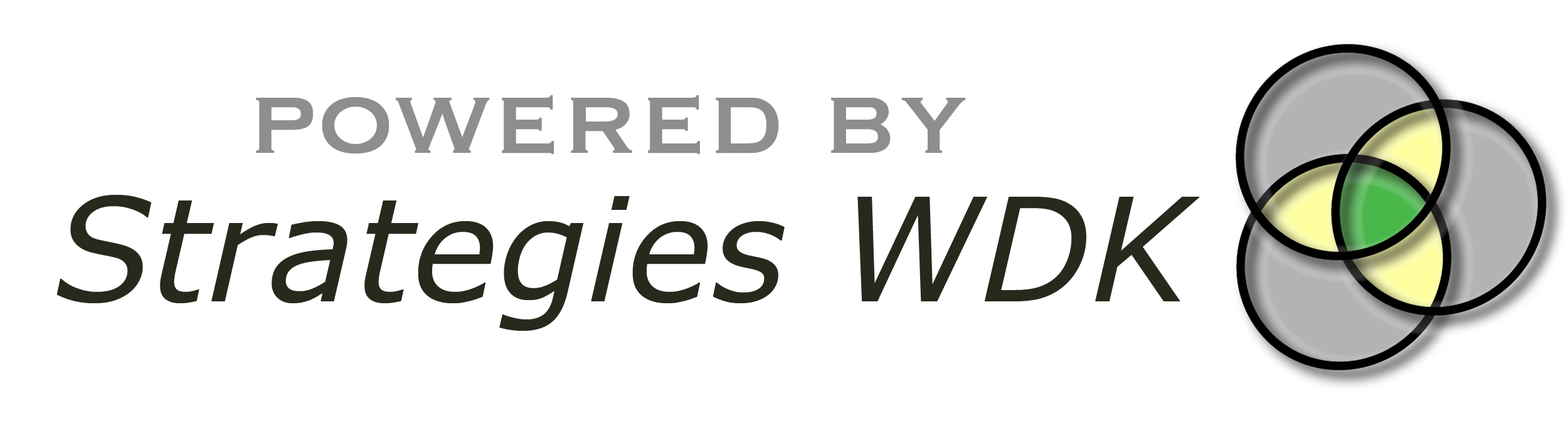
<style>
.page{position:relative;width:1568px;height:421px;background:#ffffff}
.page>*{position:absolute;margin:0}
.t1{font:125.4px "Copperplate";color:#8f8d8d}
.t2{font:143.7px "Verdana-Italic";color:#26291c}
</style>
<div class="page">
<p class="t1" style="left:256px;top:95px;width:710px;height:59px">powered by</p>
<p class="t2" style="left:56px;top:195px;width:1144px;height:136px">Strategies WDK</p>
</div>
